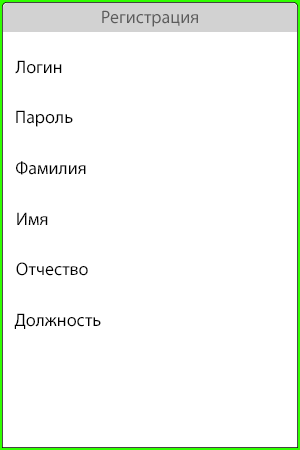
<style>
.page{position:relative;width:300px;height:450px;background:#ffffff}
.page>*{position:absolute;margin:0}
.t1{font:18px "MyriadPro-Regular";color:#5c5c5c}
.t2{font:18px "MyriadPro-Regular";color:#000000}
</style>
<div class="page">
<p class="t1" style="left:102px;top:10px;width:96px;height:17px">Регистрация</p>
<p class="t2" style="left:15px;top:60px;width:47px;height:14px">Логин</p>
<p class="t2" style="left:16px;top:110px;width:57px;height:17px">Пароль</p>
<p class="t2" style="left:16px;top:161px;width:70px;height:14px">Фамилия</p>
<p class="t2" style="left:17px;top:212px;width:31px;height:13px">Имя</p>
<p class="t2" style="left:16px;top:262px;width:72px;height:14px">Отчество</p>
<p class="t2" style="left:14px;top:313px;width:87px;height:16px">Должность</p>
</div>
